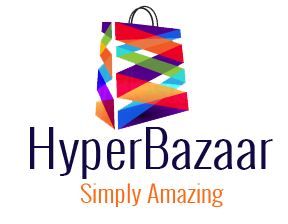
<style>
.page{position:relative;width:288px;height:224px;background:#ffffff}
.page>*{position:absolute;margin:0}
.t1{font:50px "Oswald-Light";color:#120944;scale:1.15 1}
.t2{font:23px "Oswald-Light";color:#f96c17;scale:1.15 1}
</style>
<div class="page">
<p class="t1" style="left:30px;top:127px;width:243px;height:52px">HyperBazaar</p>
<p class="t2" style="left:80px;top:183px;width:144px;height:24px">Simply Amazing</p>
</div>
